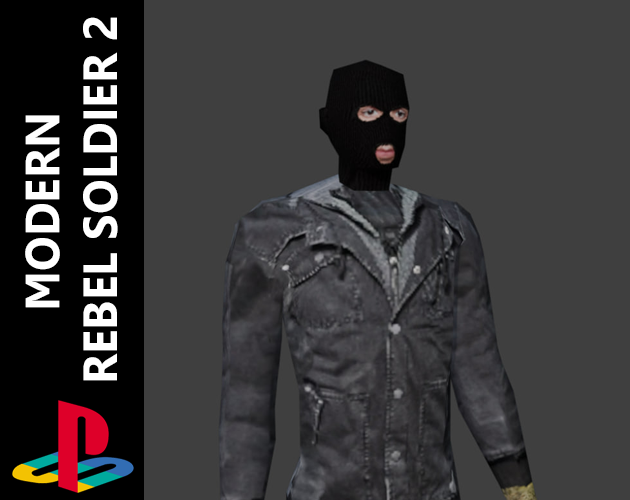
<style>
.page{position:relative;width:630px;height:500px;background:#3f3f3f}
.page>*{position:absolute;margin:0}
.t1{font:48px "Leelawadee-Bold";color:#ffffff;text-transform:uppercase;scale:0.96 1}
</style>
<div class="page">
<p class="t1" style="left:25px;top:17px;width:93px;height:364px;text-align:center;rotate:-90deg">Modern  <br>Rebel Soldier 2</p>
</div>
